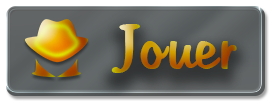
<style>
.page{position:relative;width:270px;height:102px}
.page>*{position:absolute;margin:0}
.t1{font:61.4px "Tabitha"}
</style>
<div class="page">
<p class="t1" style="left:111px;top:24px;width:126px;height:49px">Jouer</p>
</div>
